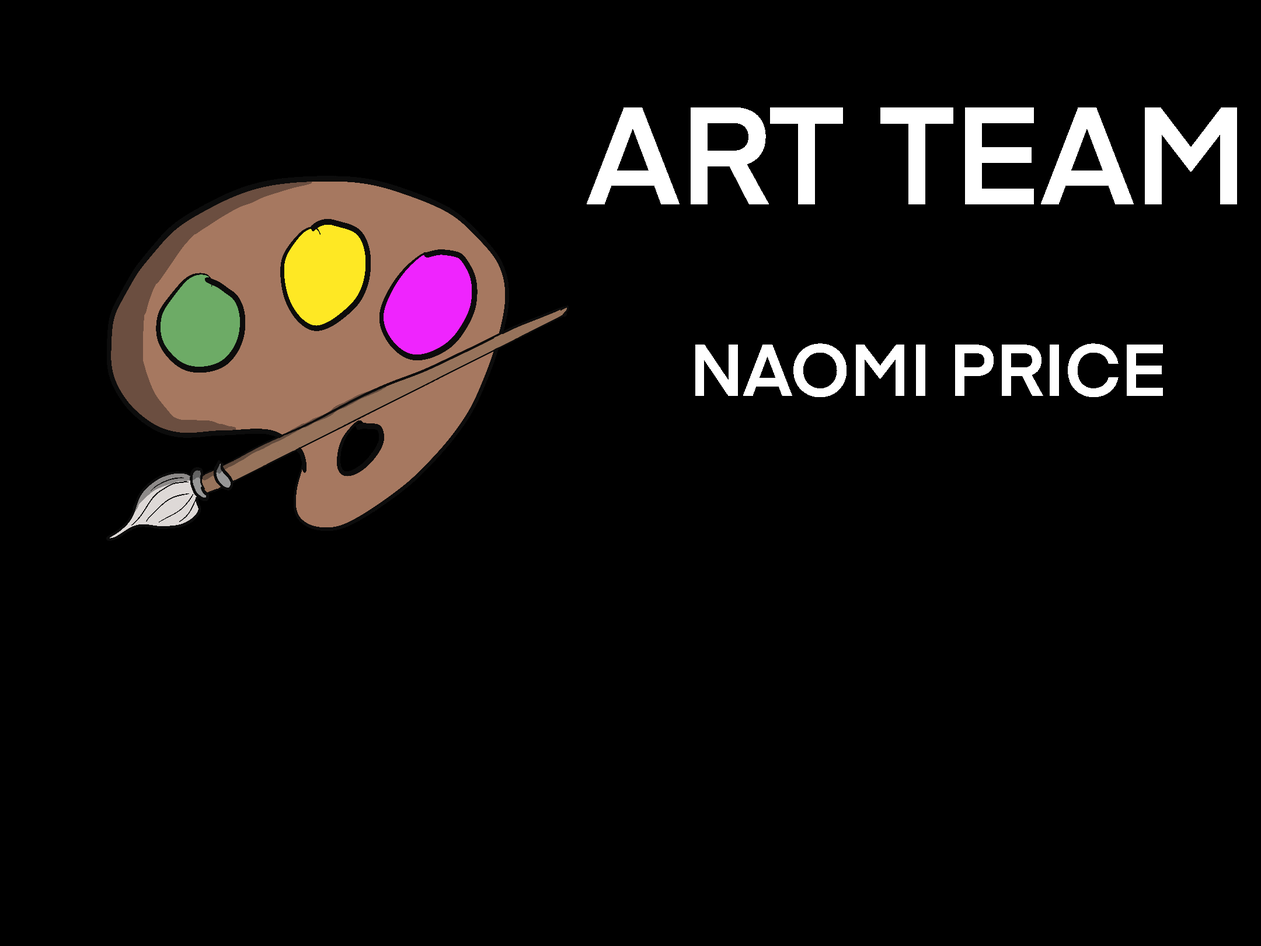
<style>
.page{position:relative;width:1261px;height:946px;background:#000000}
.page>*{position:absolute;margin:0}
.t1{font:136.4px "Eina01-SemiBold";color:#ffffff}
.t2{font:71.8px "Eina01-SemiBold";color:#ffffff}
</style>
<div class="page">
<p class="t1" style="left:0px;top:0px;width:1261px;height:946px;text-align:center">ART TEAM</p>
<p class="t2" style="left:0px;top:0px;width:1261px;height:946px;text-align:center">NAOMI PRICE</p>
</div>
